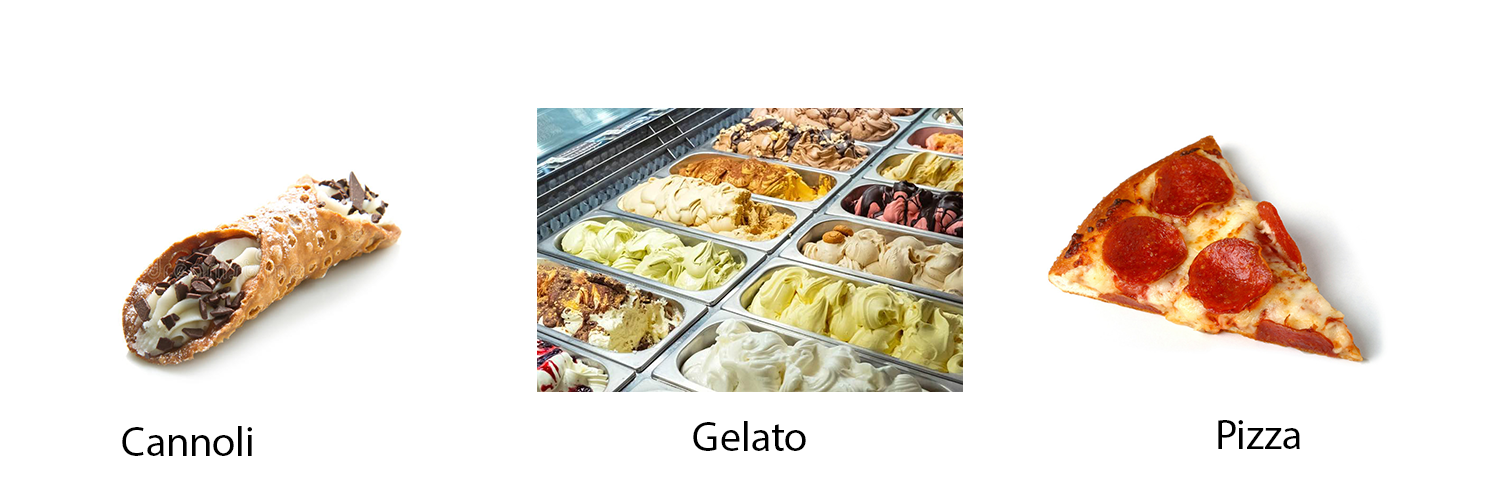
<style>
.page{position:relative;width:1500px;height:500px;background:#ffffff}
.page>*{position:absolute;margin:0}
.t1{font:42px "MyriadPro-Regular";color:#000000}
</style>
<div class="page">
<p class="t1" style="left:693px;top:421px;width:113px;height:30px">Gelato</p>
<p class="t1" style="left:1218px;top:420px;width:82px;height:29px">Pizza</p>
<p class="t1" style="left:122px;top:426px;width:130px;height:30px">Cannoli</p>
</div>
